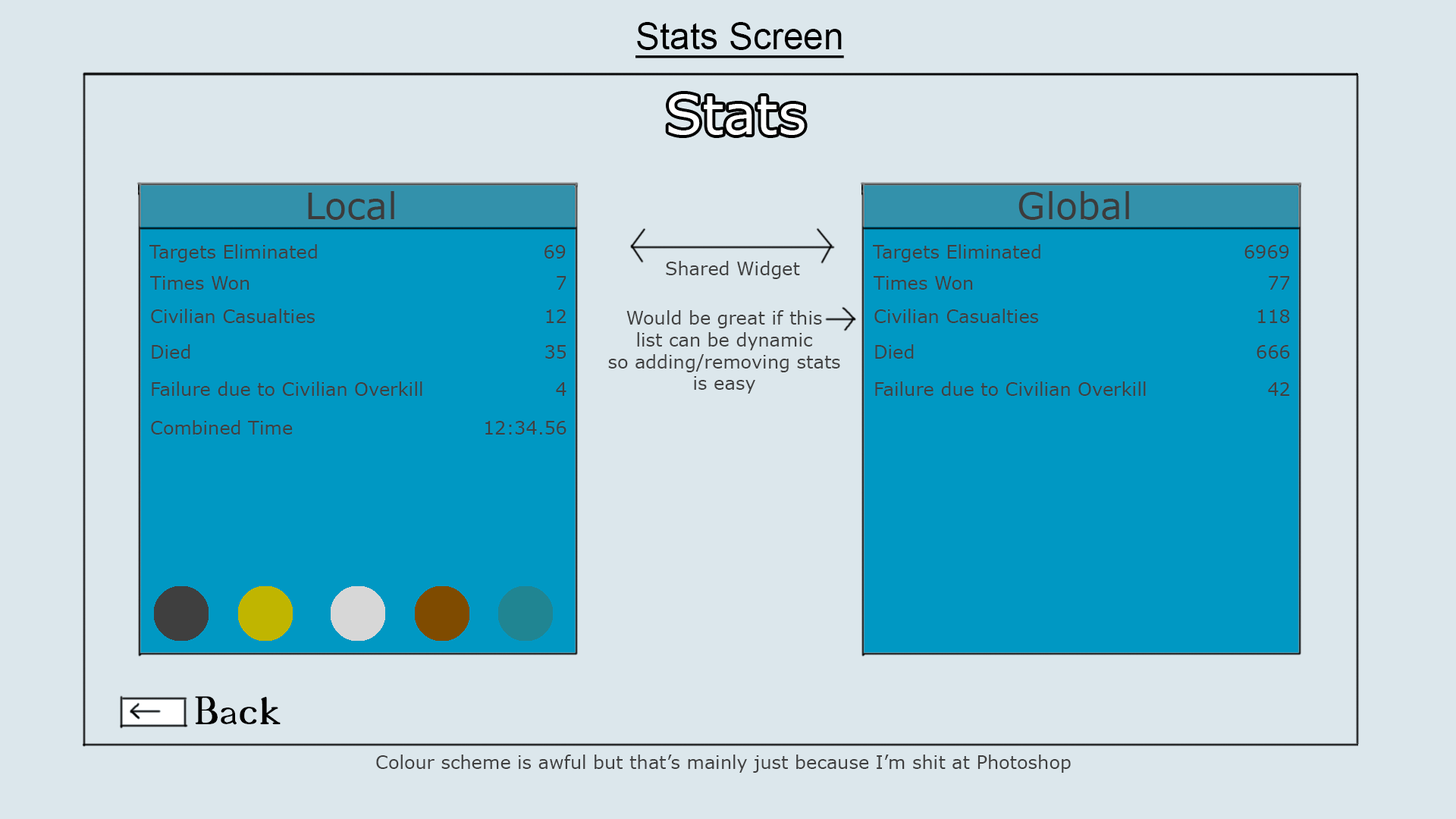
<style>
.page{position:relative;width:1456px;height:819px;background:#dce7ec}
.page>*{position:absolute;margin:0}
.t1{font:36.4px "ArialMT";color:#000000;text-decoration:underline}
.t2{font:54.6px "Verdana";color:#ffffff}
.t3{font:36.4px "Verdana";color:#3c3c3c}
.t4{font:18.2px "Verdana";color:#404040}
.t5{font:54.6px "18thCentury";color:#000000}
</style>
<div class="page">
<p class="t1" style="left:635px;top:22px;width:209px;height:36px">Stats Screen</p>
<p class="t2" style="left:668px;top:94px;width:137px;height:41px">Stats</p>
<p class="t3" style="left:308px;top:191px;width:86px;height:29px">Local</p>
<p class="t3" style="left:1018px;top:191px;width:111px;height:29px">Global</p>
<p class="t4" style="left:149px;top:244px;width:168px;height:18px">Targets Eliminated</p>
<p class="t4" style="left:544px;top:245px;width:22px;height:14px">69</p>
<p class="t4" style="left:873px;top:244px;width:167px;height:18px">Targets Eliminated</p>
<p class="t4" style="left:1244px;top:245px;width:45px;height:14px">6969</p>
<p class="t4" style="left:666px;top:261px;width:134px;height:18px">Shared Widget</p>
<p class="t4" style="left:150px;top:276px;width:99px;height:14px">Times Won</p>
<p class="t4" style="left:557px;top:276px;width:9px;height:14px">7</p>
<p class="t4" style="left:874px;top:276px;width:99px;height:14px">Times Won</p>
<p class="t4" style="left:1269px;top:276px;width:21px;height:14px">77</p>
<p class="t4" style="left:151px;top:309px;width:164px;height:14px">Civilian Casualties</p>
<p class="t4" style="left:546px;top:309px;width:20px;height:14px">12</p>
<p class="t4" style="left:608px;top:310px;width:232px;height:84px;text-align:center">Would be great if this<br>list can be dynamic<br>so adding/removing stats<br>is easy</p>
<p class="t4" style="left:874px;top:309px;width:164px;height:14px">Civilian Casualties</p>
<p class="t4" style="left:1258px;top:309px;width:32px;height:14px">118</p>
<p class="t4" style="left:152px;top:344px;width:38px;height:15px">Died</p>
<p class="t4" style="left:545px;top:345px;width:21px;height:14px">35</p>
<p class="t4" style="left:875px;top:344px;width:39px;height:15px">Died</p>
<p class="t4" style="left:1257px;top:345px;width:33px;height:14px">666</p>
<p class="t4" style="left:152px;top:381px;width:270px;height:15px">Failure due to Civilian Overkill</p>
<p class="t4" style="left:556px;top:382px;width:10px;height:14px">4</p>
<p class="t4" style="left:875px;top:381px;width:271px;height:15px">Failure due to Civilian Overkill</p>
<p class="t4" style="left:1268px;top:382px;width:22px;height:14px">42</p>
<p class="t4" style="left:151px;top:420px;width:142px;height:15px">Combined Time</p>
<p class="t4" style="left:485px;top:421px;width:81px;height:14px">12:34.56</p>
<p class="t5" style="left:195px;top:696px;width:86px;height:29px">Back</p>
<p class="t4" style="left:376px;top:755px;width:695px;height:18px">Colour scheme is awful but that’s mainly just because I’m shit at Photoshop</p>
</div>
